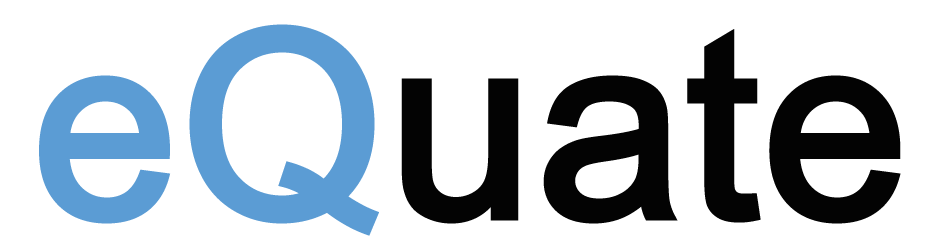
<style>
.page{position:relative;width:936px;height:252px;background:#ffffff}
.page>*{position:absolute;margin:0}
.t1{font:260px "ArialMT";letter-spacing:-0.01em;color:#030303;font-weight:bold}
.t2{font:260px "ArialMT";letter-spacing:-0.01em;color:#5b9cd4;font-weight:bold}
</style>
<div class="page">
<p class="t1" style="left:39px;top:24px;width:862px;height:212px"><span class="t2">eQ</span>uate</p>
</div>
